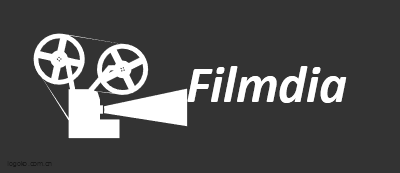
<style>
.page{position:relative;width:400px;height:173px;background:#333333}
.page>*{position:absolute;margin:0}
.t1{font:52.8px "Calibri-BoldItalic";color:#ffffff}
</style>
<div class="page">
<p class="t1" style="left:187px;top:66px;width:160px;height:37px">Filmdia</p>
</div>
